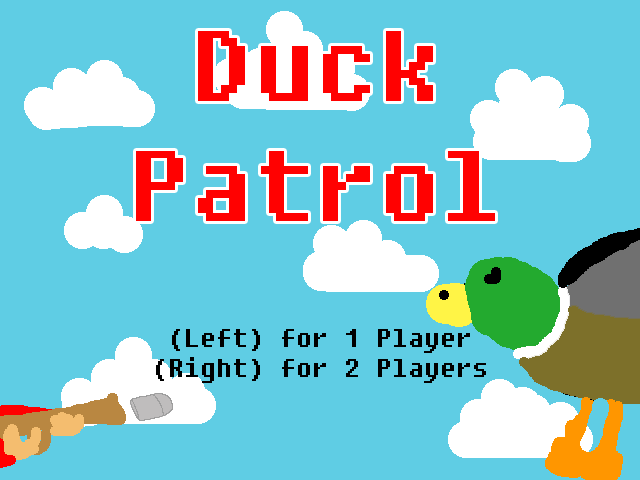
<style>
.page{position:relative;width:640px;height:480px;background:#5fcde4}
.page>*{position:absolute;margin:0}
.t1{font:100px "Fixedsys";color:#ff0101}
.t2{font:25px "Fixedsys";color:#000000}
</style>
<div class="page">
<p class="t1" style="left:136px;top:31px;width:359px;height:190px;text-align:center">Duck<br>Patrol</p>
<p class="t2" style="left:156px;top:329px;width:330px;height:54px;text-align:center">(Left) for 1 Player<br>(Right) for 2 Players</p>
</div>
